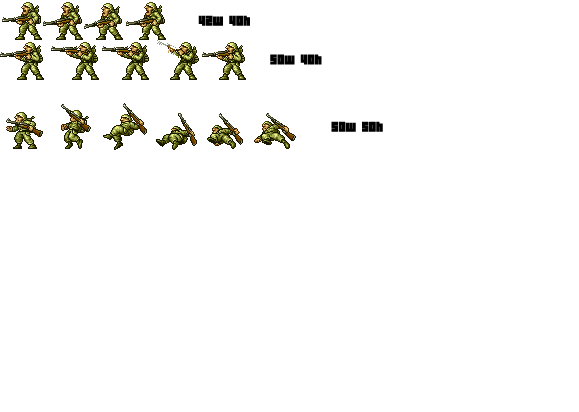
<style>
.page{position:relative;width:579px;height:412px;background:#ffffff}
.page>*{position:absolute;margin:0}
.t1{font:12px "04b19";color:#000000;font-weight:bold}
</style>
<div class="page">
<p class="t1" style="left:198px;top:15px;width:52px;height:11px">42w 40h</p>
<p class="t1" style="left:270px;top:54px;width:52px;height:11px">50w 40h</p>
<p class="t1" style="left:331px;top:121px;width:52px;height:11px">50w 50h</p>
</div>
